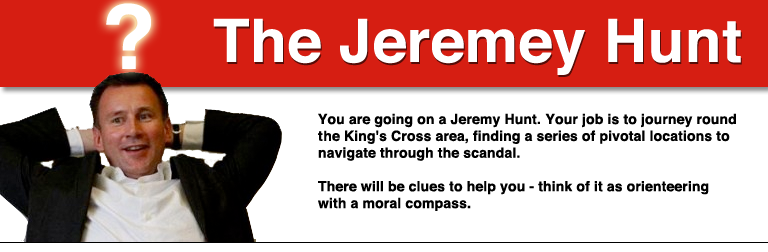
<style>
.page{position:relative;width:768px;height:252px;background:#ffffff}
.page>*{position:absolute;margin:0}
.t1{font:90px "Helvetica-Bold";letter-spacing:0.01em;color:#ffffff}
.t2{font:60px "Helvetica-Bold";letter-spacing:0.01em;color:#ffffff}
.t3{font:14px "Helvetica-Bold";letter-spacing:0.01em;color:#000000}
</style>
<div class="page">
<p class="t1" style="left:106px;top:3px;width:45px;height:66px">?</p>
<p class="t2" style="left:213px;top:18px;width:528px;height:57px">The Jeremey Hunt</p>
<p class="t3" style="left:318px;top:113px;width:418px;height:98px">You are going on a Jeremy Hunt. Your job is to journey round <br>the King's Cross area, finding a series of pivotal locations to <br>navigate through the scandal. <br><br>There will be clues to help you - think of it as orienteering <br>with a moral compass.</p>
</div>
